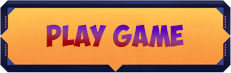
<style>
.page{position:relative;width:231px;height:73px}
.page>*{position:absolute;margin:0}
.t1{font:33.6px "000ObelixProTB"}
</style>
<div class="page">
<p class="t1" style="left:46px;top:24px;width:138px;height:24px">Play game</p>
</div>
